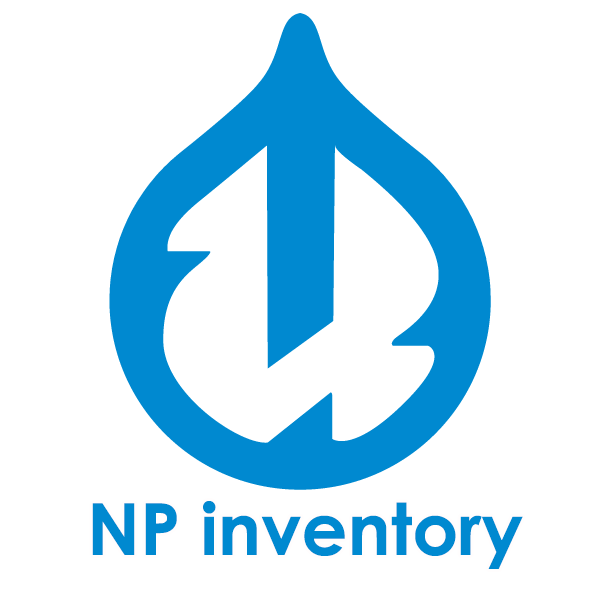
<style>
.page{position:relative;width:600px;height:600px;background:#ffffff}
.page>*{position:absolute;margin:0}
.t1{font:72px "CenturyGothic-Bold";color:#0089d0}
</style>
<div class="page">
<p class="t1" style="left:92px;top:501px;width:431px;height:68px">NP inventory</p>
</div>
